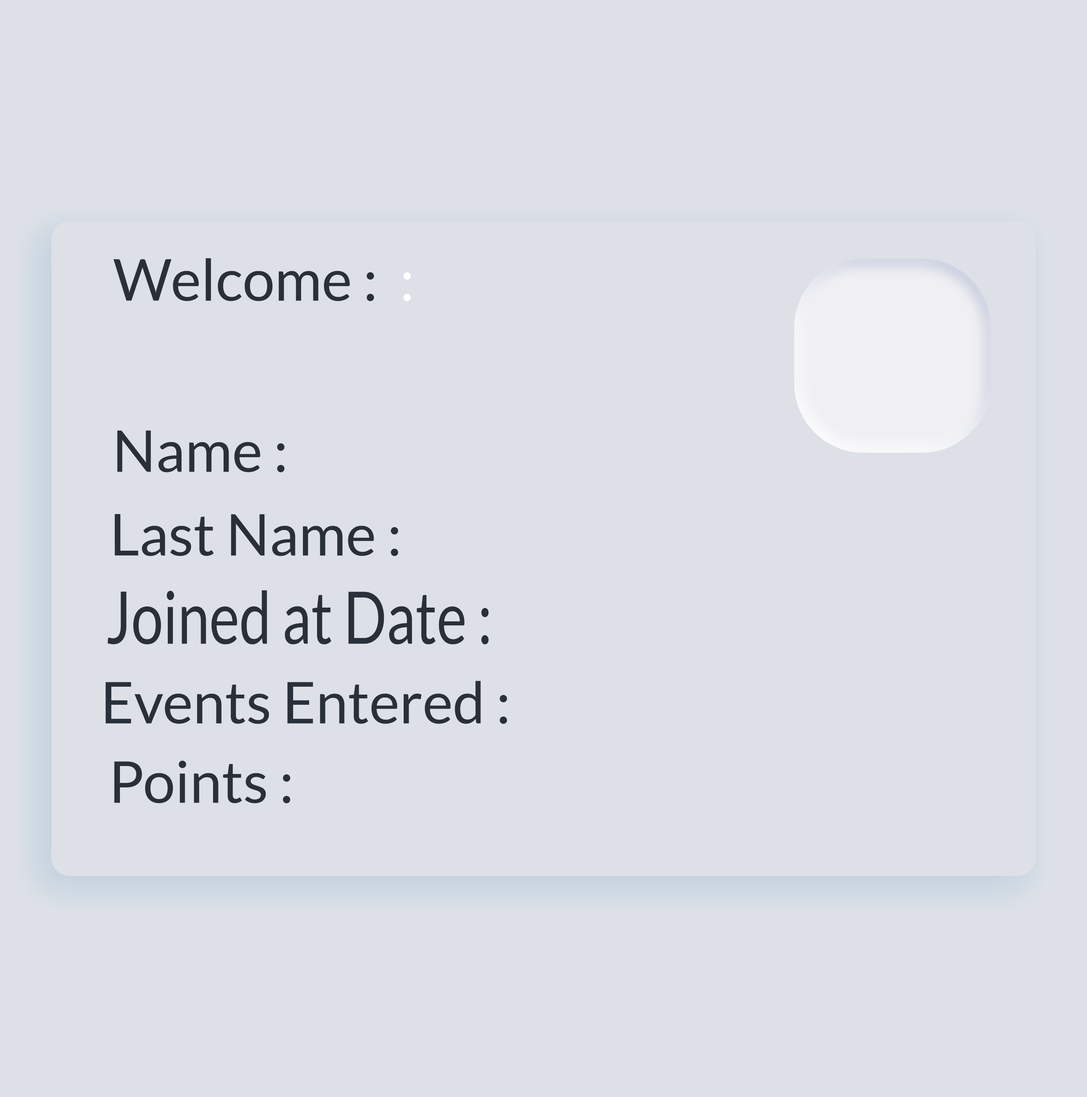
<style>
.page{position:relative;width:1087px;height:1097px;background:#dde1e7}
.page>*{position:absolute;margin:0}
.t1{font:57.6px "Lato-Regular";color:#2a3039}
.t2{font:57.6px "Lato-Regular";color:#ffffff}
.t3{font:72.5px "Lato-Regular";color:#2a3039;scale:0.79 1}
</style>
<div class="page">
<p class="t1" style="left:113px;top:258px;width:298px;height:43px">Welcome :  <span class="t2">:</span></p>
<p class="t1" style="left:117px;top:430px;width:168px;height:42px">Name :</p>
<p class="t1" style="left:115px;top:514px;width:283px;height:42px">Last Name :</p>
<p class="t3" style="left:108px;top:590px;width:381px;height:54px">Joined at Date :</p>
<p class="t1" style="left:105px;top:681px;width:402px;height:43px">Events Entered :</p>
<p class="t1" style="left:114px;top:760px;width:176px;height:43px">Points :</p>
</div>
